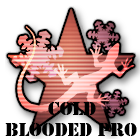
<style>
.page{position:relative;width:140px;height:140px;background:#ffffff}
.page>*{position:absolute;margin:0}
.t1{font:20px "Army";color:#000000}
</style>
<div class="page">
<p class="t1" style="left:48px;top:102px;width:48px;height:13px">Cold</p>
<p class="t1" style="left:5px;top:123px;width:132px;height:14px">BLOODED PRO</p>
</div>
